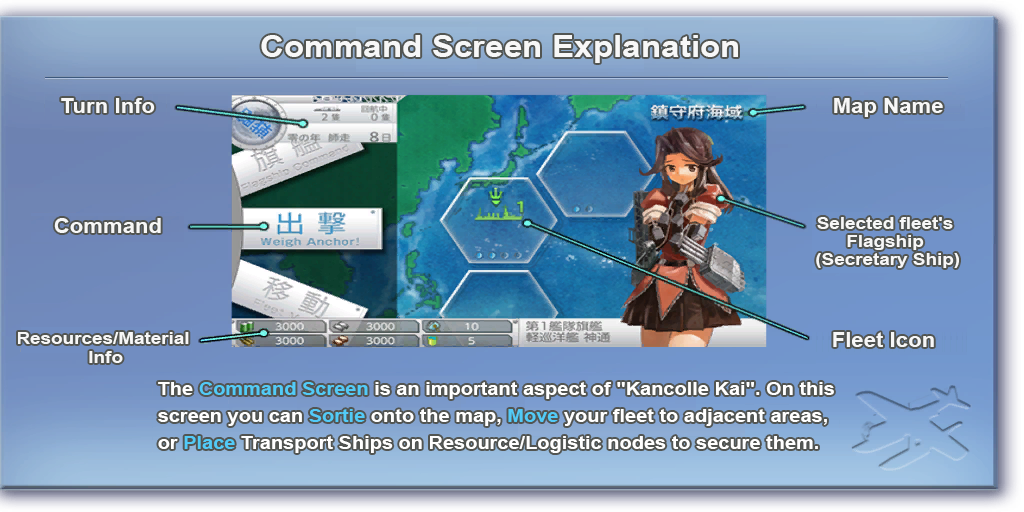
<style>
.page{position:relative;width:1024px;height:512px}
.page>*{position:absolute;margin:0}
.t1{font:30px "Arial-BoldMT";color:#f7f7f7;scale:1.11 1}
.t2{font:20px "Arial-BoldMT";color:#f7f7f7;scale:1.11 1}
.t3{font:17px/18px "Arial-BoldMT";color:#f7f7f7;scale:1.11 1}
.t4{font:17px/19px "Arial-BoldMT";color:#f7f7f7;scale:1.11 1}
.t5{font:18px/27px "Arial-BoldMT";color:#ffffff;scale:1.11 1}
.t6{font:18px/27px "Arial-BoldMT";color:#52cbf7;scale:1.11 1}
</style>
<div class="page">
<p class="t1" style="left:261px;top:35px;width:477px;height:28px">Command Screen Explanation</p>
<p class="t2" style="left:61px;top:98px;width:94px;height:15px">Turn Info</p>
<p class="t2" style="left:834px;top:98px;width:109px;height:19px">Map Name</p>
<p class="t2" style="left:54px;top:218px;width:107px;height:15px">Command</p>
<p class="t3" style="left:816px;top:217px;width:143px;height:51px;text-align:center">Selected fleet's <br>Flagship <br>(Secretary Ship)</p>
<p class="t4" style="left:18px;top:332px;width:171px;height:31px;text-align:center">Resources/Material <br>Info</p>
<p class="t2" style="left:833px;top:332px;width:101px;height:15px">Fleet Icon</p>
<p class="t5" style="left:158px;top:382px;width:676px;height:71px">The <span class="t6">Command Screen</span> is an important aspect of "Kancolle Kai". On this <br>screen you can <span class="t6">Sortie</span> onto the map, <span class="t6">Move</span> your fleet to adjacent areas,  <br>or <span class="t6">Place</span> Transport Ships on Resource/Logistic nodes to secure them.</p>
</div>
